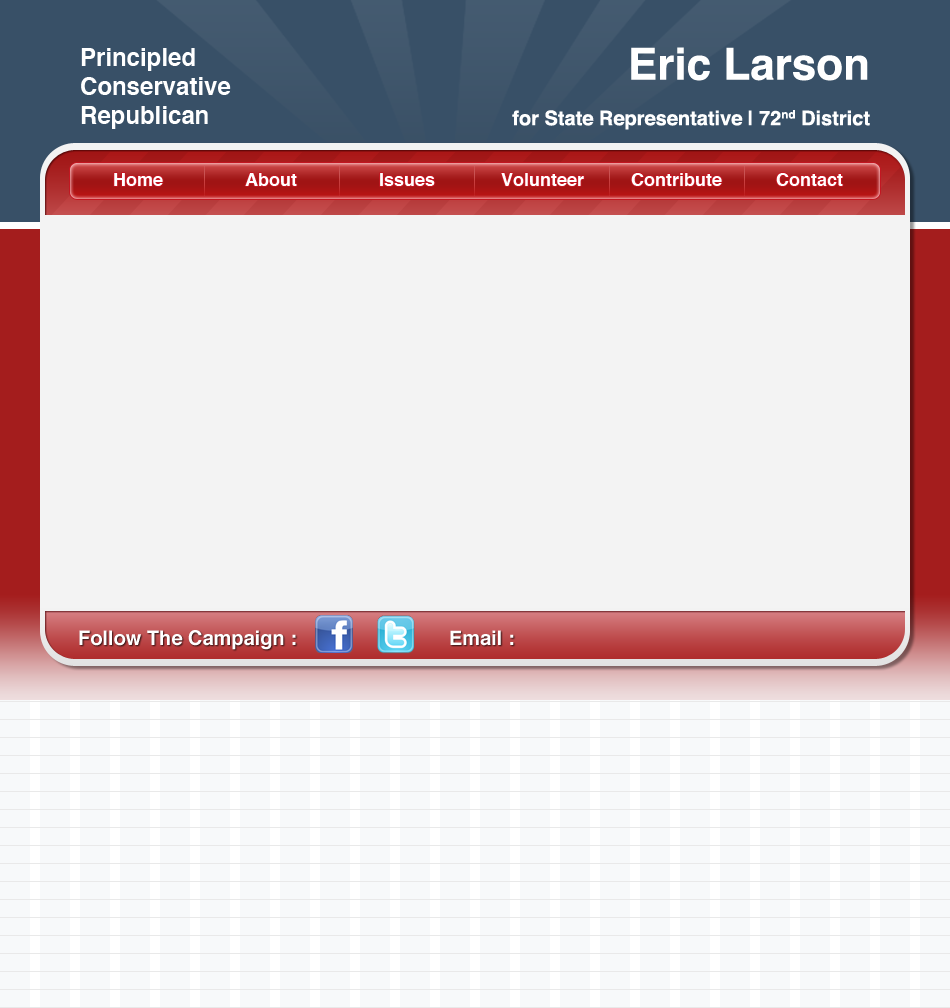
<style>
.page{position:relative;width:950px;height:1008px;background:#f3f3f3}
.page>*{position:absolute;margin:0}
.t1{font:24px "Helvetica-Bold";color:#ffffff}
.t2{font:20px "Helvetica-Bold";color:#ffffff}
.t3{font:44px "Helvetica-Bold";color:#ffffff}
.t4{font:18px "Helvetica-Bold";color:#ffffff}
</style>
<div class="page">
<p class="t1" style="left:81px;top:48px;width:150px;height:81px">Principled<br>Conservative<br>Republican</p>
<p class="t2" style="left:512px;top:47px;width:358px;height:83px;text-align:right"><span class="t3">Eric Larson<br><br></span>for State Representative | 72nd District</p>
<p class="t4" style="left:114px;top:173px;width:49px;height:13px">Home</p>
<p class="t4" style="left:245px;top:173px;width:52px;height:13px">About</p>
<p class="t4" style="left:380px;top:173px;width:55px;height:13px">Issues</p>
<p class="t4" style="left:501px;top:173px;width:83px;height:13px">Volunteer</p>
<p class="t4" style="left:631px;top:173px;width:91px;height:13px">Contribute</p>
<p class="t4" style="left:776px;top:173px;width:67px;height:13px">Contact</p>
<p class="t2" style="left:79px;top:630px;width:217px;height:20px">Follow The Campaign :</p>
<p class="t2" style="left:450px;top:630px;width:64px;height:16px">Email :</p>
</div>
